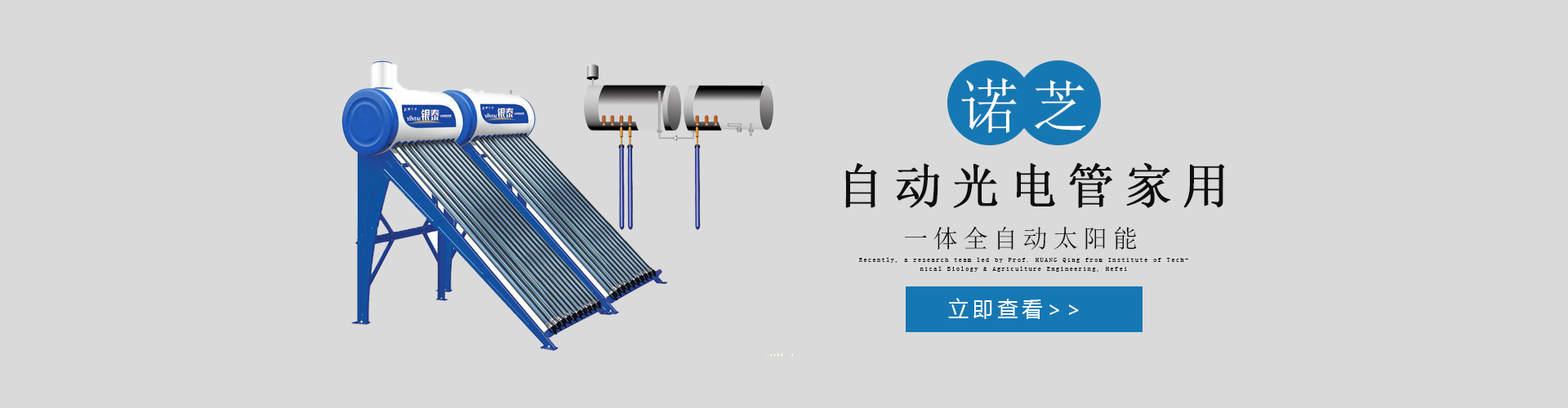
<style>
.page{position:relative;width:1568px;height:408px;background:#dadada}
.page>*{position:absolute;margin:0}
.t1{font:61.4px "SimSun";letter-spacing:1.7em;color:#ffffff}
.t2{font:57.4px "SimSun";letter-spacing:1.7em;color:#ffffff}
.t3{font:48px "SimSun";letter-spacing:0.2em;color:#0e0e0e;font-weight:bold}
.t4{font:25.2px "SimSun";letter-spacing:0.2em;color:#0e0e0e}
.t5{font:6.5px/9.3px "SimSun";letter-spacing:0.2em;color:#0e0e0e}
.t6{font:21.2px "MicrosoftYaHei";letter-spacing:0.2em;color:#ffffff}
</style>
<div class="page">
<p class="t1" style="left:961px;top:78px;width:56px;height:55px">诺</p>
<p class="t2" style="left:1035px;top:80px;width:50px;height:51px">芝</p>
<p class="t3" style="left:845px;top:163px;width:380px;height:45px">自动光电管家用</p>
<p class="t4" style="left:905px;top:226px;width:232px;height:24px">一体全自动太阳能</p>
<p class="t5" style="left:859px;top:257px;width:329px;height:15px;text-align:center">Recently, a research team led by Prof. HUANG Qing from Institute of Technical Biology &amp; Agriculture Engineering, Hefei</p>
<p class="t6" style="left:948px;top:298px;width:131px;height:21px">立即查看&gt;&gt;</p>
</div>
